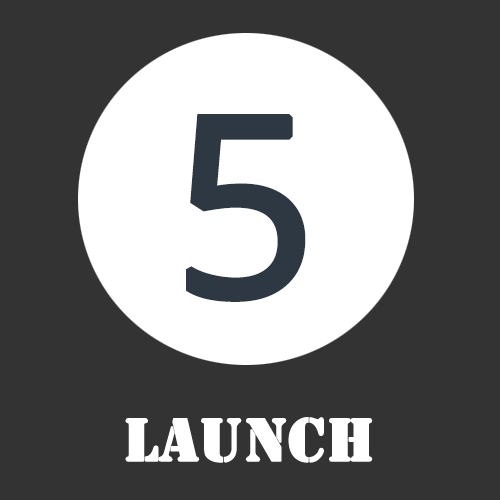
<style>
.page{position:relative;width:500px;height:500px;background:#333333}
.page>*{position:absolute;margin:0}
.t1{font:250px "OpenSans-Regular";color:#2e3842;font-weight:bold}
.t2{font:63px "Stencil";color:#ffffff;font-weight:bold}
</style>
<div class="page">
<p class="t1" style="left:186px;top:114px;width:120px;height:188px">5</p>
<p class="t2" style="left:125px;top:417px;width:248px;height:46px">Launch</p>
</div>
